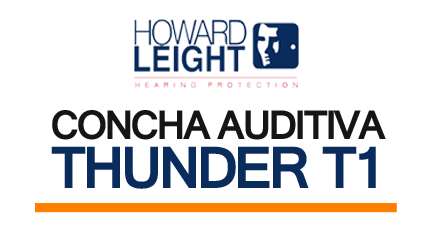
<style>
.page{position:relative;width:425px;height:225px;background:#ffffff}
.page>*{position:absolute;margin:0}
.t1{font:44.3px/49.3px "Raavi-Bold";letter-spacing:-0.08em;color:#151517;text-transform:uppercase}
.t2{font:44.3px/49.3px "Raavi-Bold";letter-spacing:-0.08em;color:#000000;text-transform:uppercase}
.t3{font:64px/49.3px "Raavi-Bold";letter-spacing:-0.08em;color:#0a2c5c;text-transform:uppercase}
</style>
<div class="page">
<p class="t1" style="left:51px;top:110px;width:335px;height:79px">CONCHA AUDITIVA<span class="t2"> <br></span><span class="t3">THUNDER T1</span></p>
</div>
